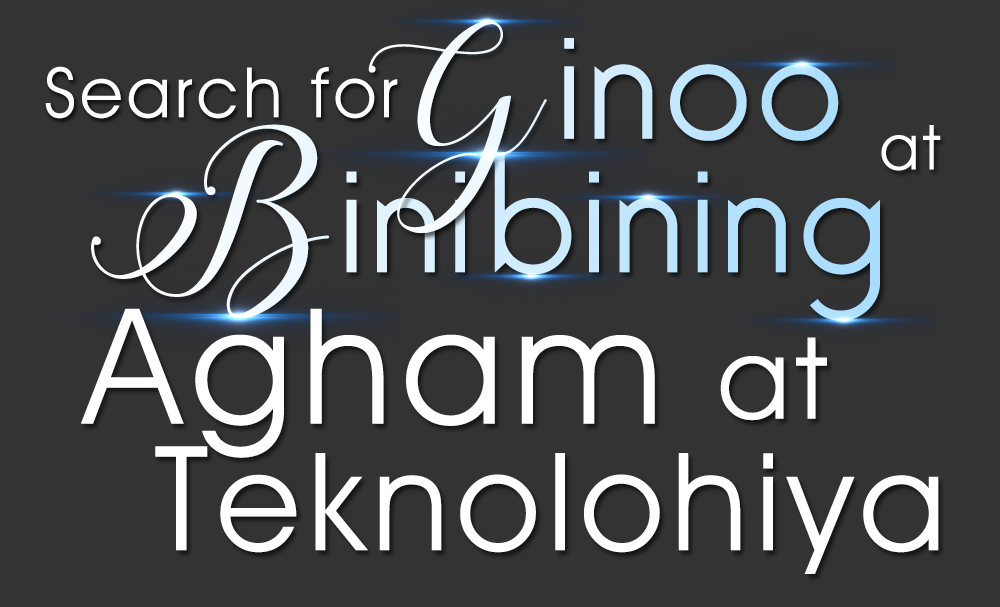
<style>
.page{position:relative;width:1000px;height:607px;background:#333333}
.page>*{position:absolute;margin:0}
.t1{font:167.7px "BelleroseLight";letter-spacing:0.06em}
.t2{font:166px "StylishCalligraphyDemo";letter-spacing:0.06em;font-weight:bold}
.t3{font:69.9px "AvantGardeITCbyBT-Book";letter-spacing:0.06em;color:#ffffff}
.t4{font:205.8px "StylishCalligraphyDemo";letter-spacing:0.06em;font-weight:bold}
.t5{font:62.7px "AvantGardeITCbyBT-Book";letter-spacing:0.06em;color:#ffffff}
.t6{font:161.5px "AvantGardeITCbyBT-Book";letter-spacing:0.06em;color:#ffffff}
.t7{font:113.8px "AvantGardeITCbyBT-Book";letter-spacing:0.06em;color:#ffffff}
.t8{font:136.4px "AvantGardeITCbyBT-Book";letter-spacing:0.06em;color:#ffffff}
.t9{font:146.1px "AvantGardeITCbyBT-Book";letter-spacing:0.06em;color:#ffffff}
</style>
<div class="page">
<p class="t1" style="left:368px;top:20px;width:471px;height:214px"><span class="t2">G</span>inoo</p>
<p class="t3" style="left:45px;top:66px;width:353px;height:53px">Search for</p>
<p class="t1" style="left:91px;top:124px;width:789px;height:197px"><span class="t4">B</span>inibining</p>
<p class="t5" style="left:881px;top:125px;width:60px;height:46px">at</p>
<p class="t6" style="left:81px;top:308px;width:574px;height:150px">Agham</p>
<p class="t7" style="left:720px;top:337px;width:107px;height:84px">at</p>
<p class="t8" style="left:155px;top:446px;width:784px;height:128px"><span class="t9">T</span>eknolohiya</p>
</div>
